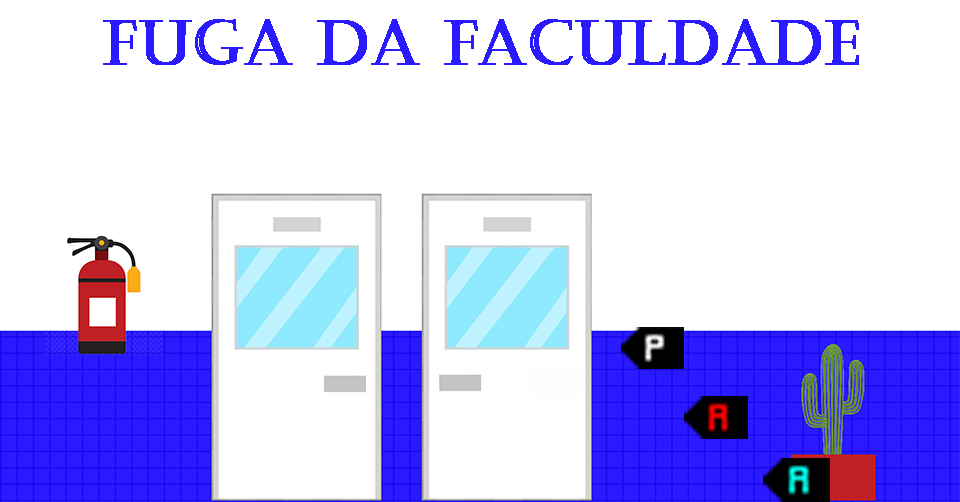
<style>
.page{position:relative;width:960px;height:502px;background:#ffffff}
.page>*{position:absolute;margin:0}
.t1{font:61.6px "Castellar";color:#2a1aff;font-weight:bold}
</style>
<div class="page">
<p class="t1" style="left:103px;top:19px;width:756px;height:46px">FUGA DA FACULDADE</p>
</div>
